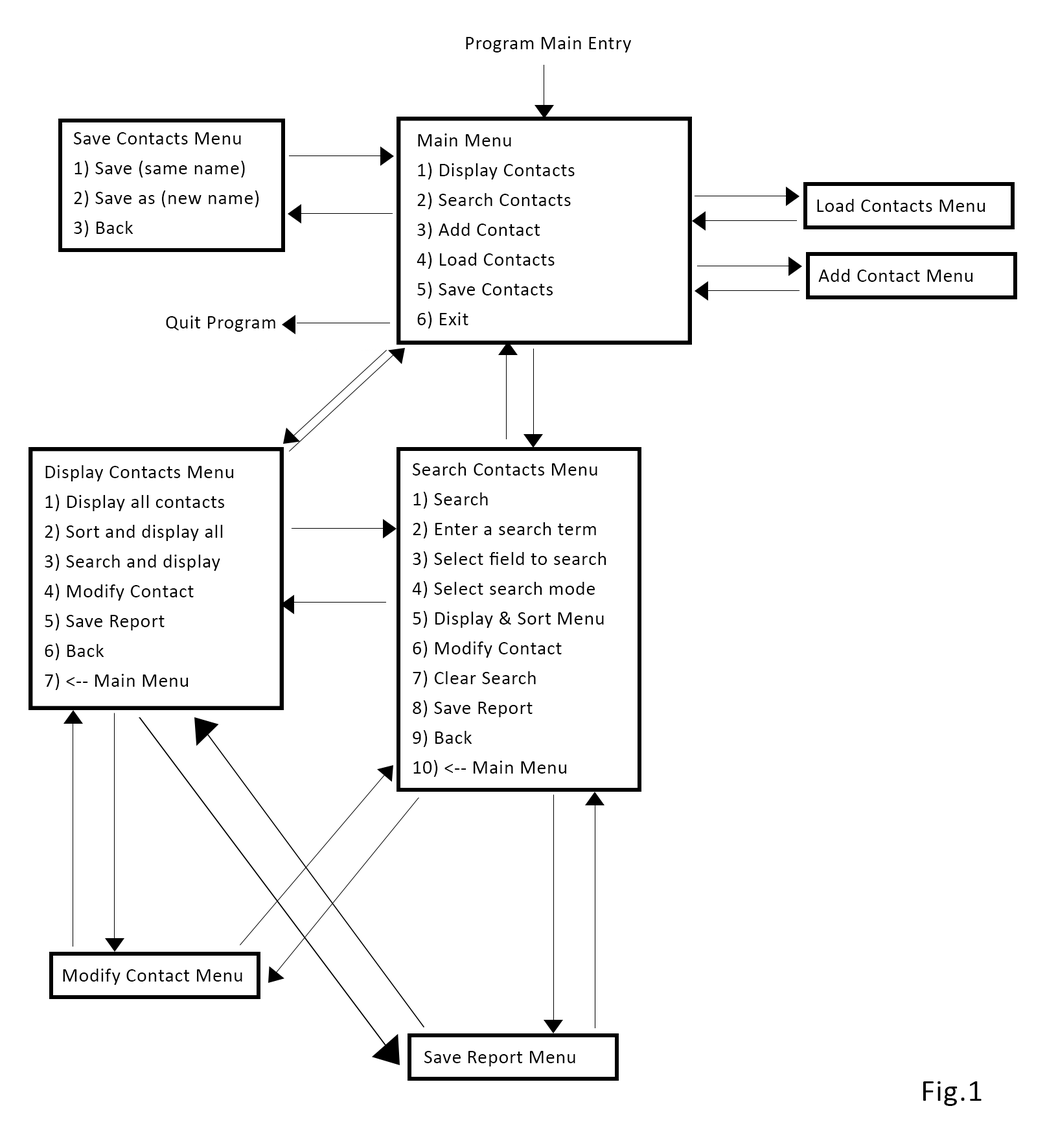
<style>
.page{position:relative;width:1058px;height:1128px;background:#ffffff}
.page>*{position:absolute;margin:0}
.t1{font:19.4px "Calibri";letter-spacing:0.026em;color:#000000}
.t2{font:19.4px/29.8px "Calibri";letter-spacing:0.026em;color:#000000}
.t3{font:31.1px "Calibri";letter-spacing:0.026em;color:#000000}
</style>
<div class="page">
<p class="t1" style="left:466px;top:36px;width:165px;height:16px">Program Main Entry</p>
<p class="t2" style="left:74px;top:132px;width:185px;height:105px">Save Contacts Menu<br>1) Save (same name)<br>2) Save as (new name)<br>3) Back</p>
<p class="t2" style="left:416px;top:133px;width:158px;height:195px">Main Menu<br>1) Display Contacts<br>2) Search Contacts<br>3) Add Contact<br>4) Load Contacts<br>5) Save Contacts<br>6) Exit</p>
<p class="t1" style="left:817px;top:199px;width:167px;height:13px">Load Contacts Menu</p>
<p class="t1" style="left:818px;top:269px;width:154px;height:13px">Add Contact Menu</p>
<p class="t1" style="left:166px;top:315px;width:109px;height:17px">Quit Program</p>
<p class="t2" style="left:44px;top:465px;width:189px;height:225px">Display Contacts Menu<br>1) Display all contacts<br>2) Sort and display all<br>3) Search and display<br>4) Modify Contact<br>5) Save Report<br>6) Back<br>7) &lt;-- Main Menu</p>
<p class="t2" style="left:412px;top:462px;width:194px;height:315px">Search Contacts Menu<br>1) Search<br>2) Enter a search term<br>3) Select field to search<br>4) Select search mode<br>5) Display &amp; Sort Menu<br>6) Modify Contact<br>7) Clear Search<br>8) Save Report<br>9) Back<br>10) &lt;-- Main Menu</p>
<p class="t1" style="left:63px;top:968px;width:179px;height:16px">Modify Contact Menu</p>
<p class="t1" style="left:424px;top:1050px;width:151px;height:16px">Save Report Menu</p>
<p class="t3" style="left:923px;top:1081px;width:58px;height:24px">Fig.1</p>
</div>
